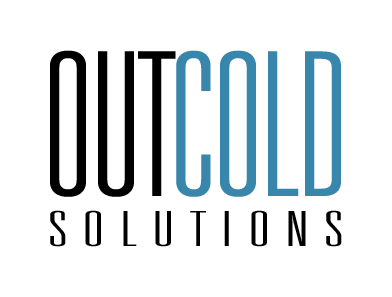
<style>
.page{position:relative;width:392px;height:297px;background:#ffffff}
.page>*{position:absolute;margin:0}
.t1{font:200px "UniversalAccreditation";color:#3986ad;text-transform:uppercase}
.t2{font:200px "UniversalAccreditation";color:#000000;text-transform:uppercase}
.t3{font:48.4px "UniversalAccreditation";letter-spacing:0.2em;color:#000000;text-transform:uppercase;scale:1.76 1}
</style>
<div class="page">
<p class="t1" style="left:50px;top:50px;width:291px;height:147px"><span class="t2">out</span>cold</p>
<p class="t3" style="left:50px;top:210px;width:292px;height:37px">solutions</p>
</div>
